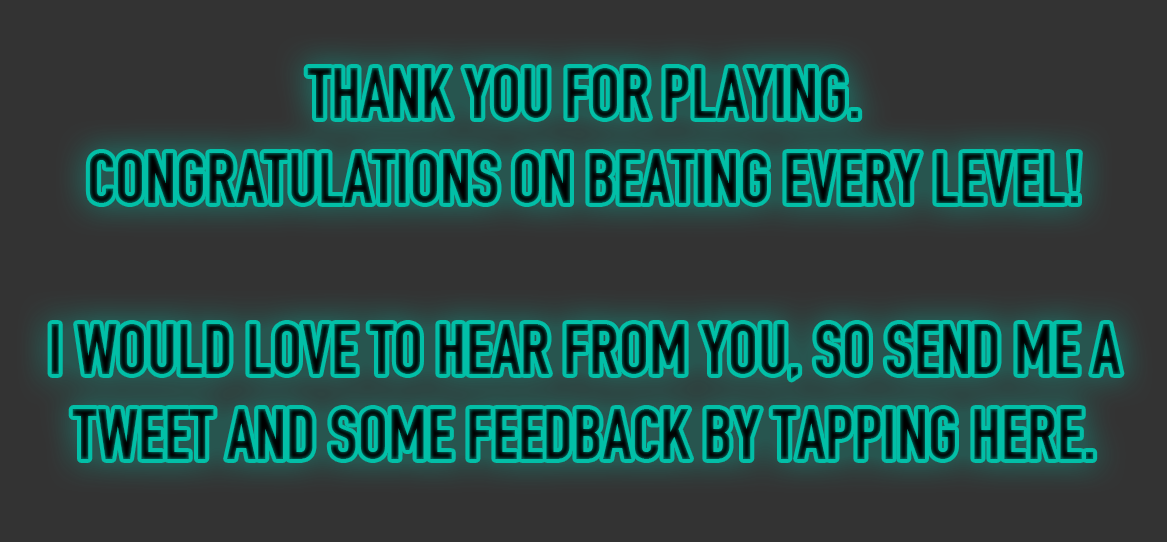
<style>
.page{position:relative;width:1167px;height:542px;background:#333333}
.page>*{position:absolute;margin:0}
.t1{font:70.2px/85.2px "DINEngschrift";text-transform:uppercase}
</style>
<div class="page">
<p class="t1" style="left:51px;top:68px;width:1070px;height:391px;text-align:center">Thank you for playing.<br>Congratulations ON beating every level!<br><br>I would love to hear from you, so send me a tweet and some feedback by tapping here.</p>
</div>
